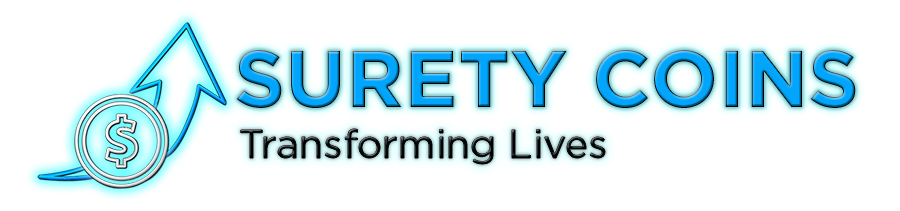
<style>
.page{position:relative;width:900px;height:211px;background:#ffffff}
.page>*{position:absolute;margin:0}
.t1{font:80.4px "Gotham-Bold"}
.t2{font:39.4px "Gotham-Book";color:#000204}
</style>
<div class="page">
<p class="t1" style="left:236px;top:50px;width:620px;height:58px">SURETY COINS</p>
<p class="t2" style="left:240px;top:129px;width:365px;height:35px">Transforming Lives</p>
</div>
